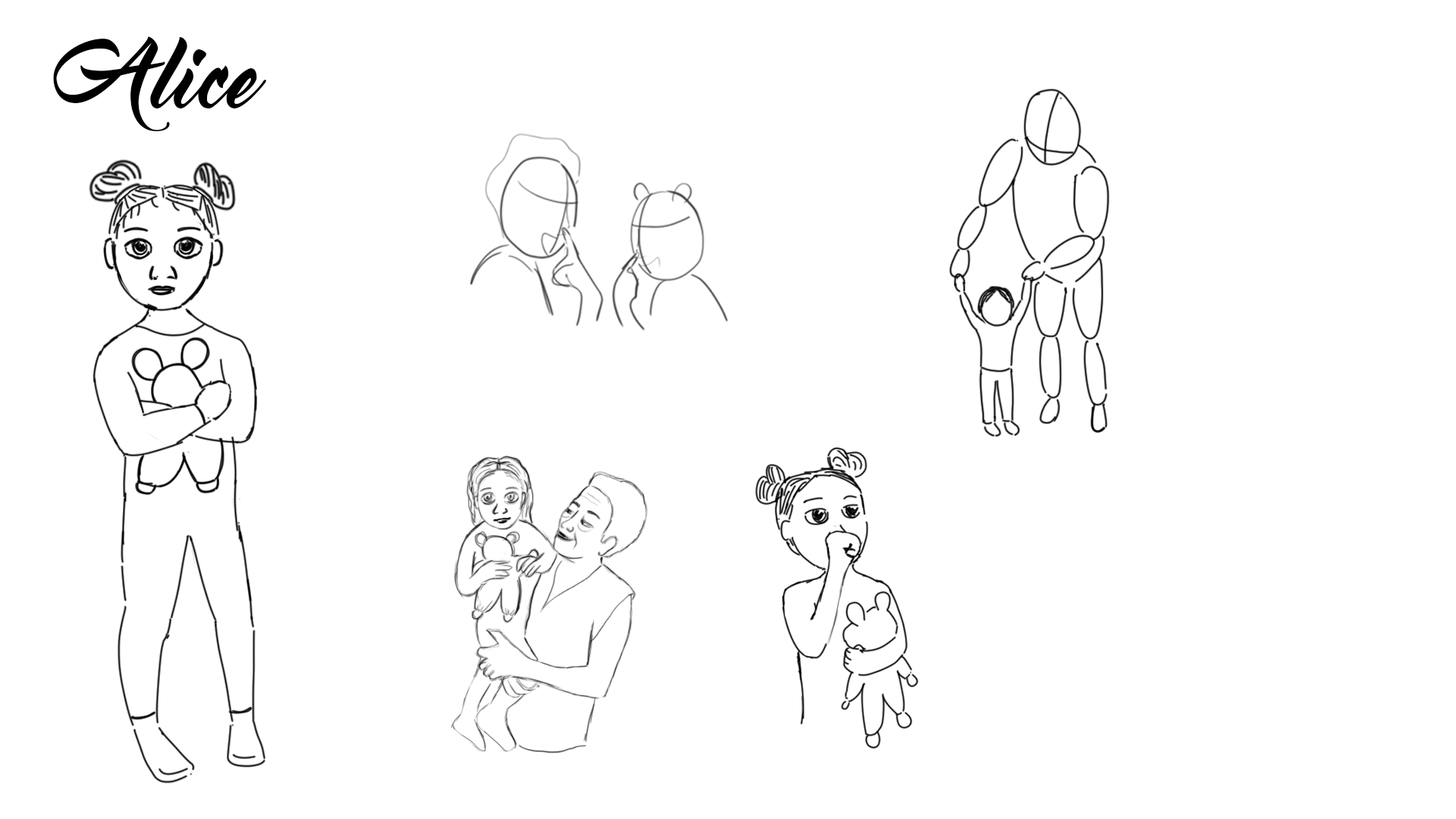
<style>
.page{position:relative;width:1456px;height:819px;background:#ffffff}
.page>*{position:absolute;margin:0}
.t1{font:80.2px "MasterOfBreak";color:#000000}
</style>
<div class="page">
<p class="t1" style="left:53px;top:36px;width:213px;height:95px">Alice</p>
</div>
